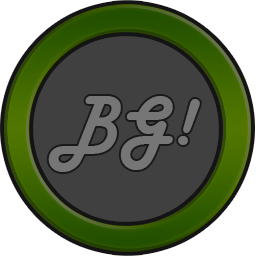
<style>
.page{position:relative;width:256px;height:256px;background:#404040}
.page>*{position:absolute;margin:0}
.t1{font:72px "HarlowSolid";color:#767676}
</style>
<div class="page">
<p class="t1" style="left:48px;top:96px;width:152px;height:76px">BG!</p>
</div>
